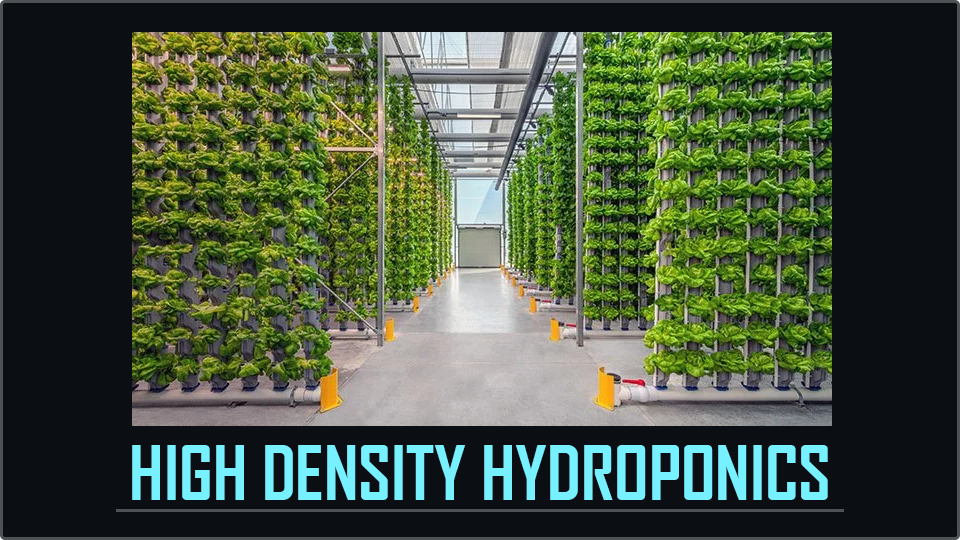
<style>
.page{position:relative;width:960px;height:540px;background:#0b0f13}
.page>*{position:absolute;margin:0}
.t1{font:72px "AgencyFB-Bold";color:#77f0ff}
</style>
<div class="page">
<p class="t1" style="left:132px;top:445px;width:696px;height:55px">HIGH DENSITY HYDROPONICS</p>
</div>
